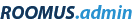
<style>
.page{position:relative;width:132px;height:22px;background:#ffffff}
.page>*{position:absolute;margin:0}
.t1{font:19.4px "MyriadPro-BoldIt"}
.t2{font:19.4px "MyriadPro-BoldIt";color:#173456}
</style>
<div class="page">
<p class="t1" style="left:0px;top:5px;width:132px;height:14px">ROOMUS.admin</p>
<p class="t2" style="left:0px;top:6px;width:75px;height:13px">ROOMUS</p>
</div>
